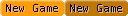
<style>
.page{position:relative;width:128px;height:16px;background:#ff9c00}
.page>*{position:absolute;margin:0}
.t1{font:12px "AndaleMono";letter-spacing:-0.02em;color:#000000}
</style>
<div class="page">
<p class="t1" style="left:6px;top:4px;width:52px;height:8px">New Game</p>
<p class="t1" style="left:70px;top:4px;width:52px;height:8px">New Game</p>
</div>
